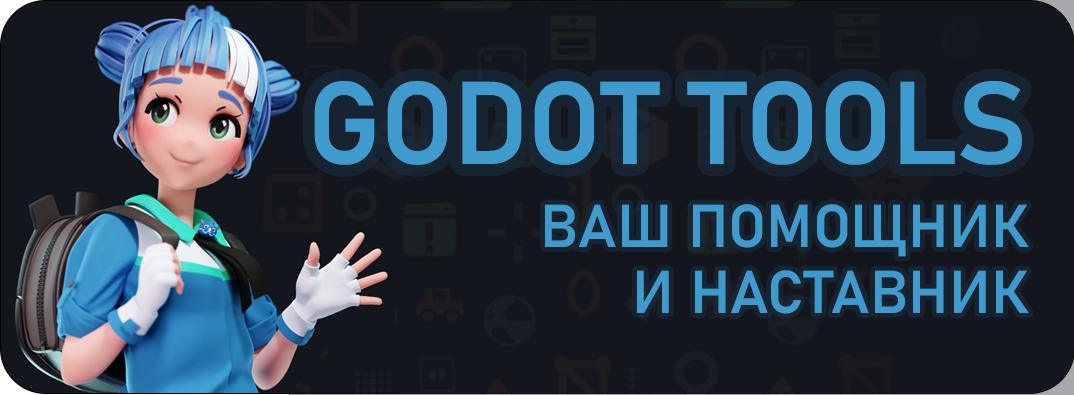
<style>
.page{position:relative;width:1074px;height:395px;background:#13161d}
.page>*{position:absolute;margin:0}
.t1{font:116px "Bahnschrift-SemiBold";color:#3f9bcd;text-transform:uppercase}
.t2{font:59.6px/66.2px "Bahnschrift-SemiBold";color:#3f9bcd;text-transform:uppercase}
</style>
<div class="page">
<p class="t1" style="left:314px;top:81px;width:708px;height:84px">Godot tooLs</p>
<p class="t2" style="left:545px;top:204px;width:484px;height:110px;text-align:right">ваш помощник<br>и наставник</p>
</div>
